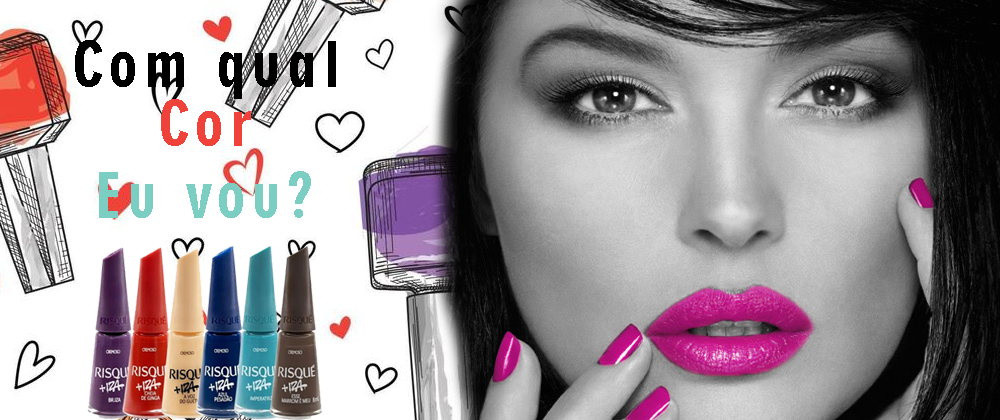
<style>
.page{position:relative;width:1000px;height:420px}
.page>*{position:absolute;margin:0}
.t1{font:60px "Geometric706BT-BlackCondensedB";letter-spacing:0.11em;color:#000000}
.t2{font:60px "Geometric706BT-BlackCondensedB";letter-spacing:0.11em;color:#7ccec2}
.t3{font:60px "Geometric706BT-BlackCondensedB";letter-spacing:0.11em;color:#ef423b}
</style>
<div class="page">
<p class="t1" style="left:75px;top:40px;width:261px;height:59px">Com qual</p>
<p class="t2" style="left:99px;top:99px;width:212px;height:119px;text-align:center"><span class="t3">Cor<br></span>Eu vou?</p>
</div>
